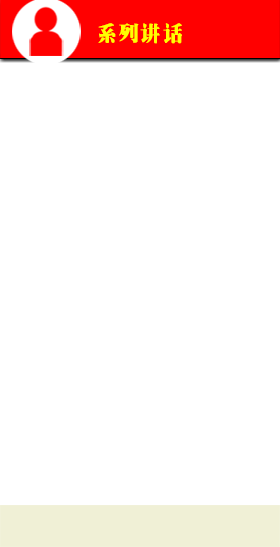
<style>
.page{position:relative;width:280px;height:547px;background:#ffffff}
.page>*{position:absolute;margin:0}
.t1{font:22.2px "RS_CuBiao";letter-spacing:0.05em;color:#ffff00;scale:0.94 1}
</style>
<div class="page">
<p class="t1" style="left:98px;top:23px;width:84px;height:21px">系列讲话</p>
</div>
